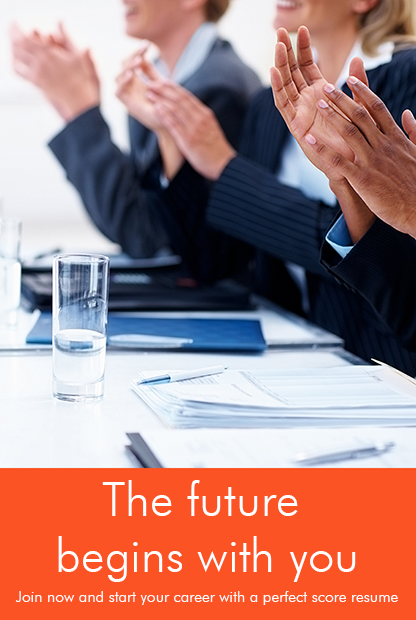
<style>
.page{position:relative;width:416px;height:620px;background:#fb5324}
.page>*{position:absolute;margin:0}
.t1{font:47.3px "FuturaBT-Light";color:#ffffff}
.t2{font:15.8px "FuturaBT-Light";color:#ffffff}
</style>
<div class="page">
<p class="t1" style="left:58px;top:480px;width:298px;height:102px;text-align:center">The future <br>begins with you</p>
<p class="t2" style="left:15px;top:591px;width:383px;height:14px">Join now and start your career with a perfect score resume</p>
</div>
